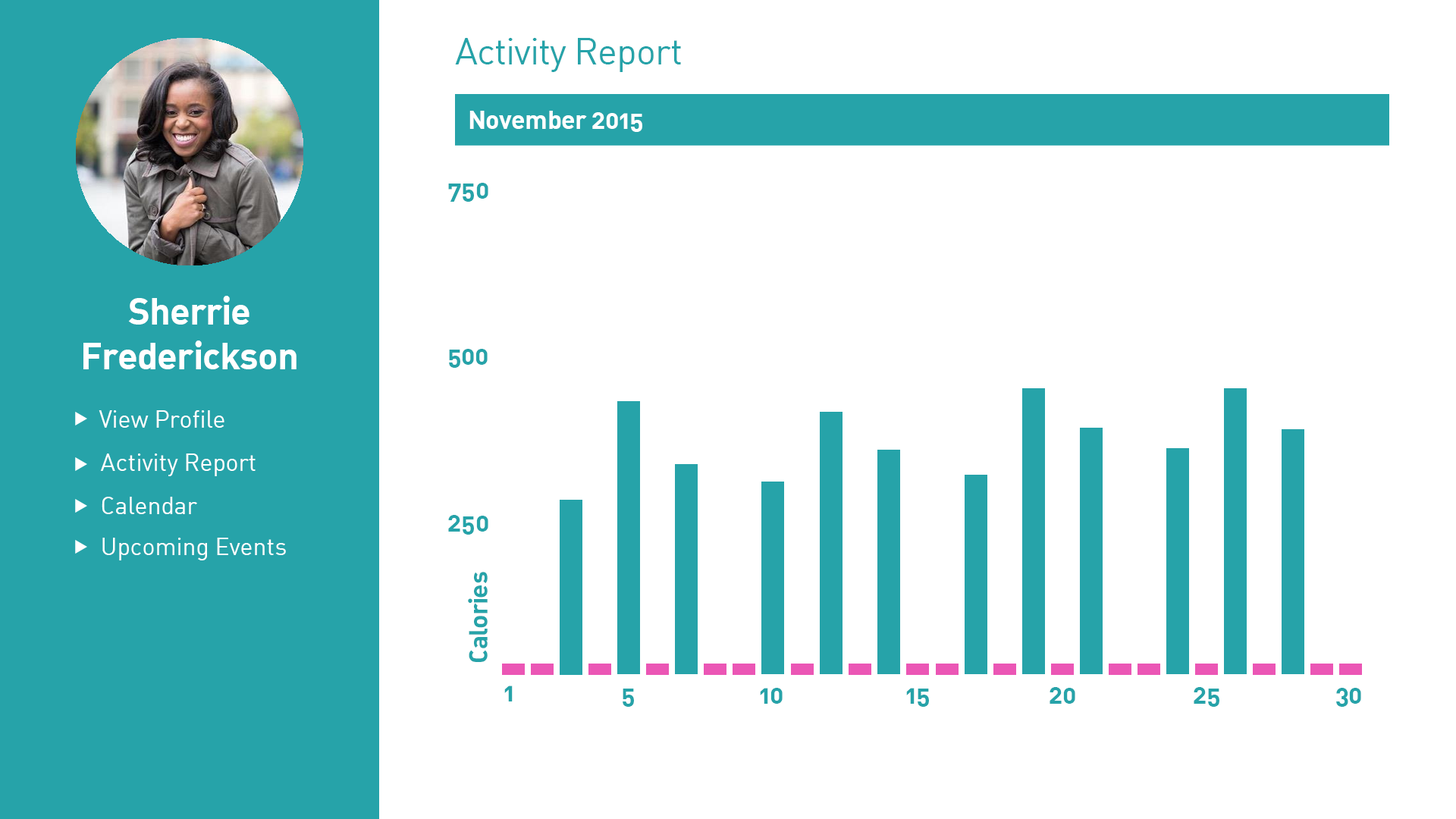
<style>
.page{position:relative;width:1456px;height:819px;background:#ffffff}
.page>*{position:absolute;margin:0}
.t1{font:37.2px "DINAlternate-Regular";letter-spacing:-0.02em;color:#26a3a9}
.t2{font:25.8px "DINAlternate-Bold";letter-spacing:-0.02em;color:#ffffff}
.t3{font:25.8px "DINAlternate-Bold";letter-spacing:-0.02em;color:#26a3a9}
.t4{font:37.2px "DINAlternate-Bold";letter-spacing:-0.02em;color:#ffffff}
.t5{font:24.3px "DINAlternate-Regular";color:#ffffff}
</style>
<div class="page">
<p class="t1" style="left:455px;top:38px;width:226px;height:34px">Activity Report</p>
<p class="t2" style="left:469px;top:111px;width:173px;height:21px">November 2015</p>
<p class="t3" style="left:448px;top:183px;width:40px;height:19px">750</p>
<p class="t4" style="left:83px;top:296px;width:214px;height:73px;text-align:center">Sherrie <br>Frederickson</p>
<p class="t3" style="left:449px;top:349px;width:39px;height:19px">500</p>
<p class="t5" style="left:99px;top:410px;width:125px;height:18px">View Profile</p>
<p class="t5" style="left:100px;top:453px;width:156px;height:23px">Activity Report</p>
<p class="t5" style="left:102px;top:497px;width:95px;height:17px">Calendar</p>
<p class="t3" style="left:448px;top:515px;width:40px;height:20px">250</p>
<p class="t5" style="left:102px;top:538px;width:184px;height:22px">Upcoming Events</p>
<p class="t3" style="left:468px;top:572px;width:20px;height:90px;rotate:-90deg">Calories</p>
<p class="t3" style="left:504px;top:686px;width:9px;height:15px">1</p>
<p class="t3" style="left:623px;top:689px;width:11px;height:18px">5</p>
<p class="t3" style="left:760px;top:688px;width:23px;height:16px">10</p>
<p class="t3" style="left:906px;top:688px;width:23px;height:19px">15</p>
<p class="t3" style="left:1050px;top:687px;width:25px;height:17px">20</p>
<p class="t3" style="left:1194px;top:687px;width:25px;height:20px">25</p>
<p class="t3" style="left:1336px;top:688px;width:25px;height:19px">30</p>
</div>
